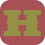
<style>
.page{position:relative;width:45px;height:45px;background:#a75157}
.page>*{position:absolute;margin:0}
.t1{font:50px "Saddlebag-Black";color:#949146}
</style>
<div class="page">
<p class="t1" style="left:3px;top:10px;width:38px;height:26px">H</p>
</div>
